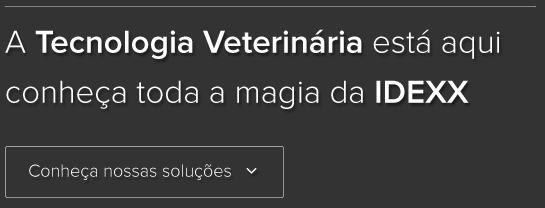
<style>
.page{position:relative;width:545px;height:208px;background:#333333}
.page>*{position:absolute;margin:0}
.t1{font:33px/50px "ProximaNova-Light";color:#ffffff}
.t2{font:33px/50px "ProximaNova-Semibold";color:#ffffff}
</style>
<div class="page">
<p class="t1" style="left:5px;top:29px;width:495px;height:80px">A <span class="t2">Tecnologia Veterinária</span> está aqui<br>conheça toda a magia da <span class="t2">IDEXX</span></p>
</div>
